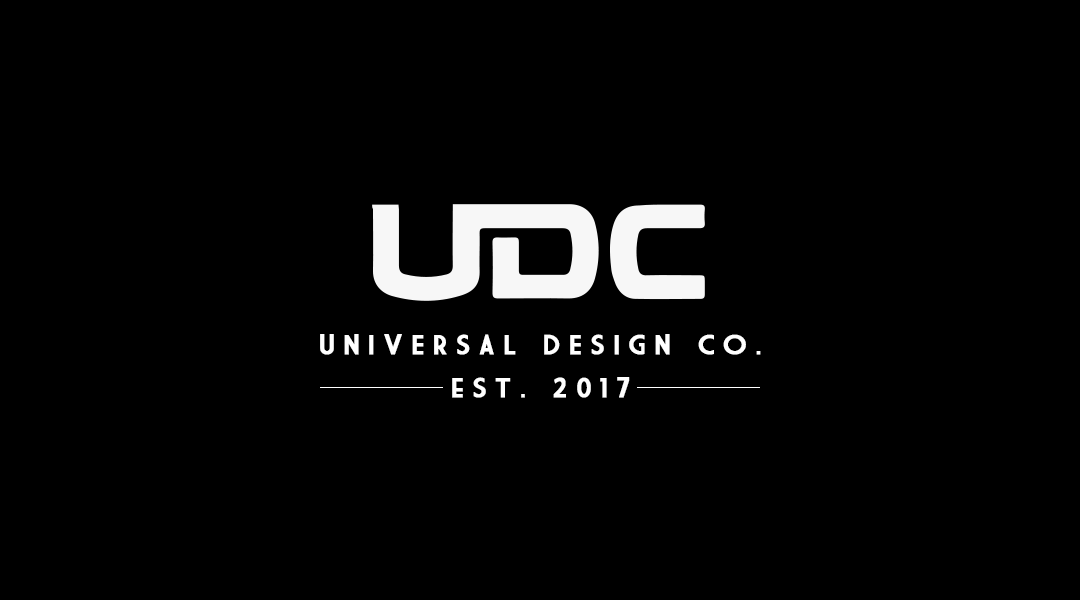
<style>
.page{position:relative;width:1080px;height:600px;background:#000000}
.page>*{position:absolute;margin:0}
.t1{font:26.7px "MarketDeco";letter-spacing:0.26em;color:#ffffff;font-weight:bold;scale:1.08 1}
</style>
<div class="page">
<p class="t1" style="left:320px;top:334px;width:441px;height:21px">UNIVERSAL DESIGN CO.</p>
<p class="t1" style="left:452px;top:377px;width:178px;height:21px">est. 2017</p>
</div>
